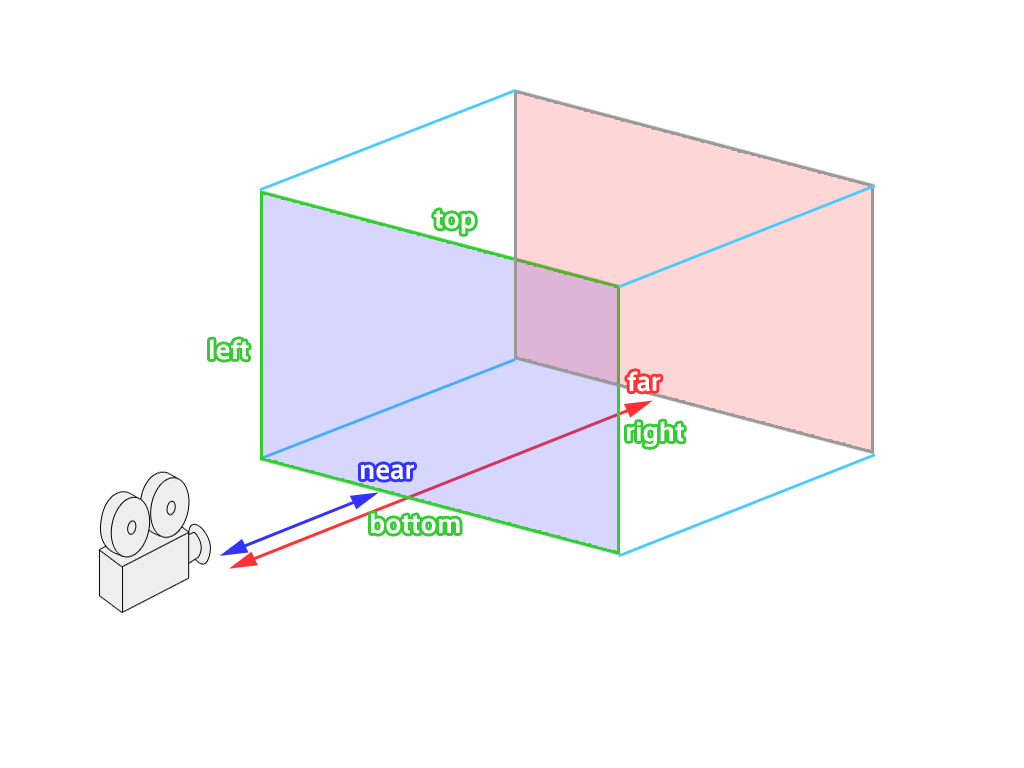
<style>
.page{position:relative;width:1024px;height:768px;background:#ffffff}
.page>*{position:absolute;margin:0}
.t1{font:24px "AxisStd-Bold";color:#ffffff}
</style>
<div class="page">
<p class="t1" style="left:434px;top:210px;width:41px;height:24px">top</p>
<p class="t1" style="left:210px;top:339px;width:39px;height:21px">left</p>
<p class="t1" style="left:627px;top:371px;width:34px;height:21px">far</p>
<p class="t1" style="left:626px;top:421px;width:58px;height:26px">right</p>
<p class="t1" style="left:360px;top:464px;width:54px;height:16px">near</p>
<p class="t1" style="left:371px;top:513px;width:89px;height:21px">bottom</p>
</div>
